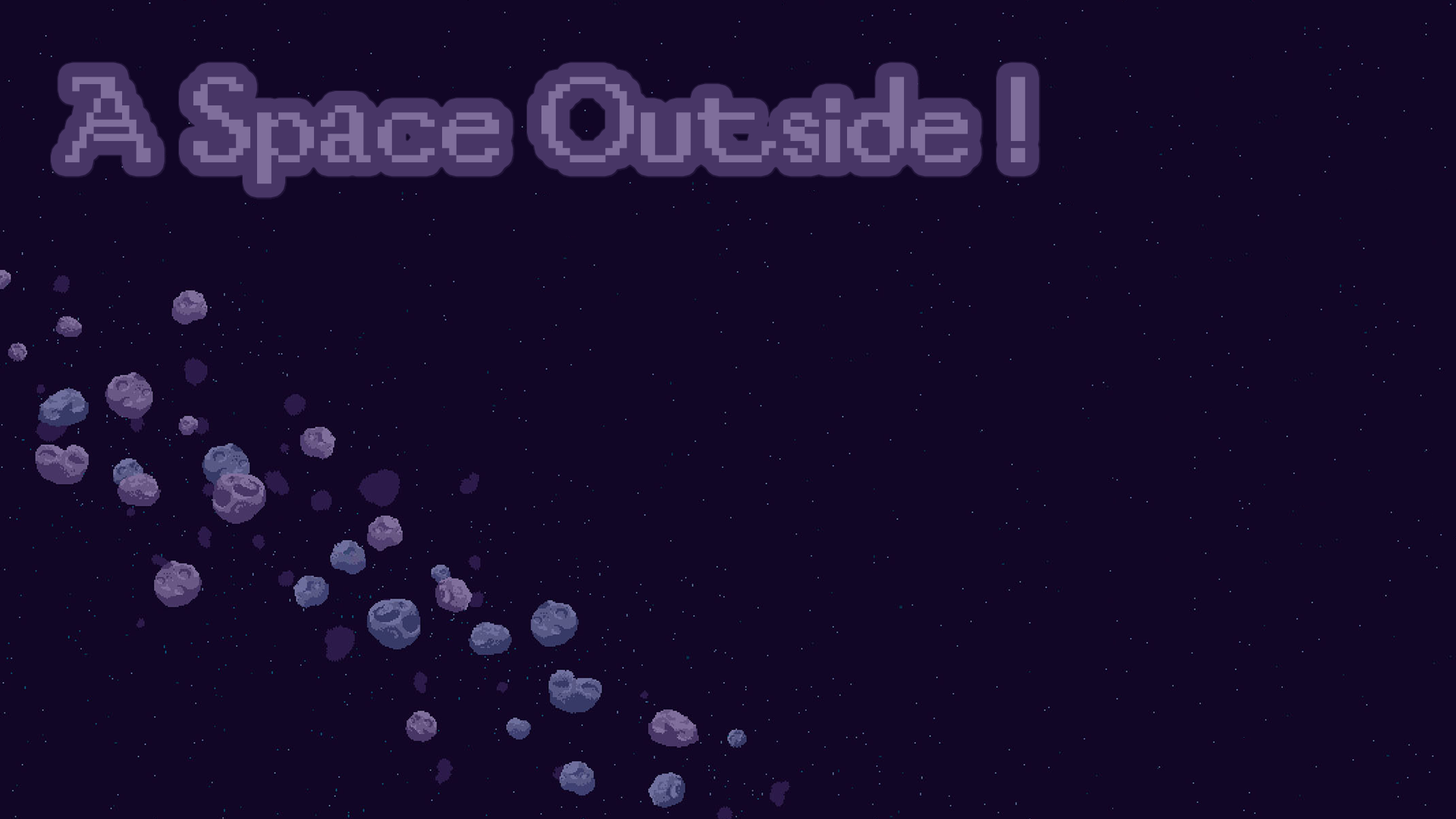
<style>
.page{position:relative;width:1456px;height:819px;background:#110626}
.page>*{position:absolute;margin:0}
.t1{font:113.7px "PixelMordredRUS";color:#7f6e9b}
</style>
<div class="page">
<p class="t1" style="left:65px;top:77px;width:960px;height:107px">A Space Outside !</p>
</div>
